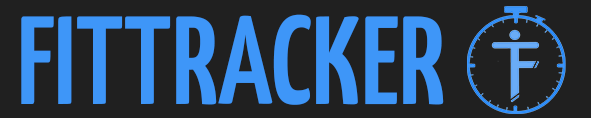
<style>
.page{position:relative;width:591px;height:118px;background:#202020}
.page>*{position:absolute;margin:0}
.t1{font:125px "YanoneKaffeesatz-SemiBold";color:#3e96f8}
</style>
<div class="page">
<p class="t1" style="left:21px;top:14px;width:423px;height:91px">FITTRACKER</p>
</div>
